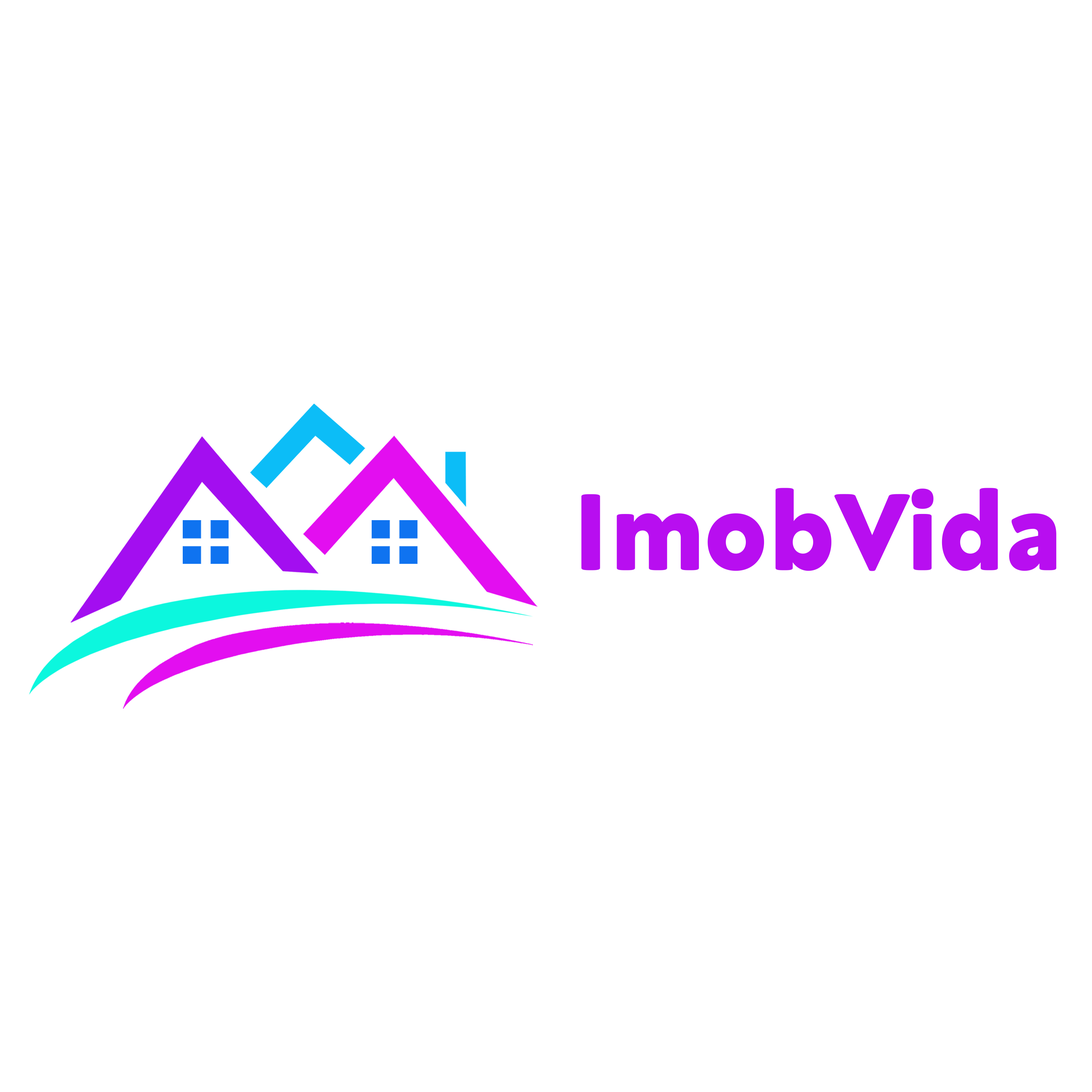
<style>
.page{position:relative;width:1092px;height:1092px;background:#ffffff}
.page>*{position:absolute;margin:0}
.t1{font:111px "Neufreit-ExtraBold";color:#b80ef0}
</style>
<div class="page">
<p class="t1" style="left:581px;top:488px;width:475px;height:83px">ImobVida</p>
</div>
